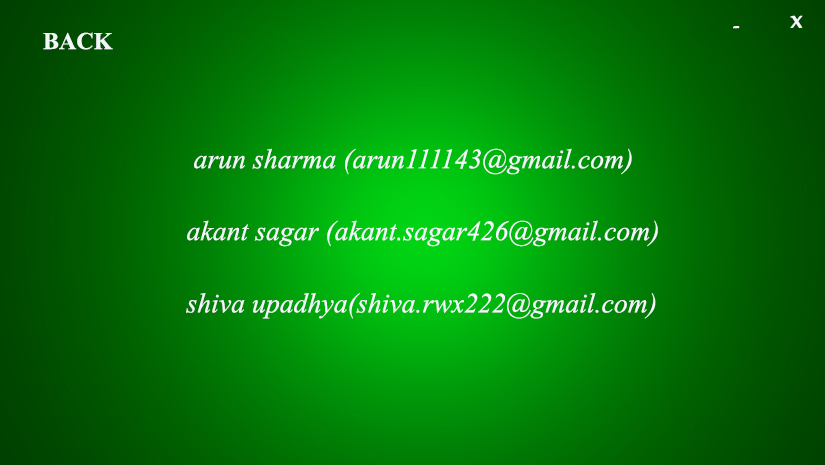
<style>
.page{position:relative;width:825px;height:465px}
.page>*{position:absolute;margin:0}
.t1{font:32.6px "Nyala-Regular";color:#f4f7f9;scale:0.96 1}
.t2{font:27.5px "Mistral";color:#f3f6f8;scale:0.96 1}
.t3{font:24px "TimesNewRomanPS-BoldMT";color:#f3f6f8}
.t4{font:27.8px "TimesNewRomanPS-ItalicMT";color:#f3f6f8}
</style>
<div class="page">
<p class="t1" style="left:790px;top:15px;width:13px;height:13px">x</p>
<p class="t2" style="left:733px;top:26px;width:7px;height:3px">-</p>
<p class="t3" style="left:43px;top:32px;width:70px;height:18px">BACK</p>
<p class="t4" style="left:194px;top:148px;width:438px;height:27px">arun sharma (arun111143@gmail.com)</p>
<p class="t4" style="left:187px;top:220px;width:471px;height:27px">akant sagar (akant.sagar426@gmail.com)</p>
<p class="t4" style="left:186px;top:293px;width:470px;height:26px">shiva upadhya(shiva.rwx222@gmail.com)</p>
</div>
